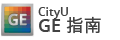
<style>
.page{position:relative;width:120px;height:40px;background:#ffffff}
.page>*{position:absolute;margin:0}
.t1{font:12px/16px "OpenSans-Semibold";color:#424242}
.t2{font:18px/16px "OpenSans-Semibold";color:#424242}
.t3{font:18px/16px "MHeiHK-Bold";color:#424242}
</style>
<div class="page">
<p class="t1" style="left:38px;top:7px;width:63px;height:27px">CityU<br><span class="t2">GE </span><span class="t3">指南</span></p>
</div>
